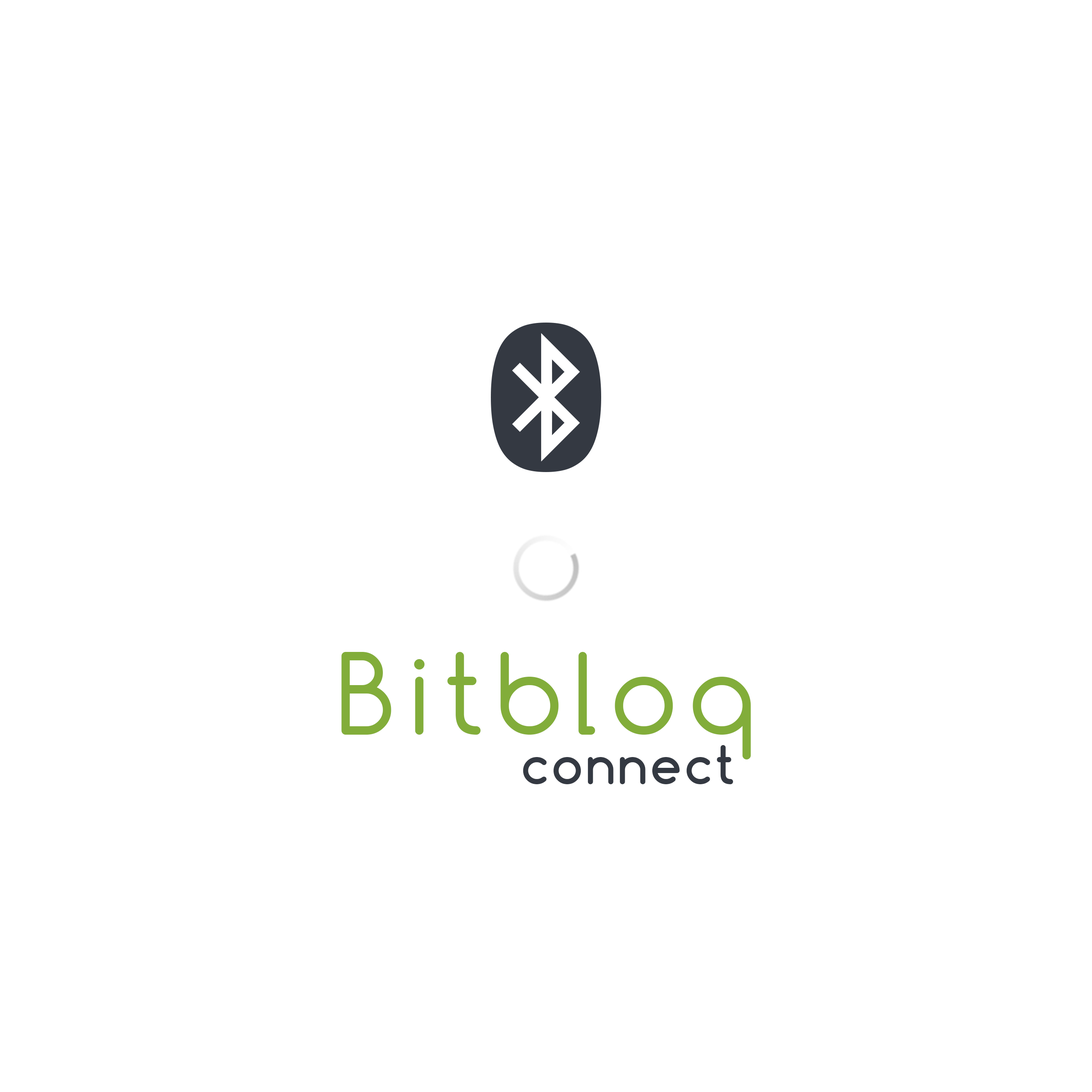
<style>
.page{position:relative;width:1092px;height:1092px;background:#ffffff}
.page>*{position:absolute;margin:0}
.t1{font:105.9px "Comfortaa";letter-spacing:0.11em;color:#82ad3a}
.t2{font:50px "Comfortaa-Bold";letter-spacing:0.06em;color:#343942}
</style>
<div class="page">
<p class="t1" style="left:341px;top:652px;width:410px;height:107px">Bitbloq</p>
<p class="t2" style="left:523px;top:745px;width:210px;height:39px">connect</p>
</div>
